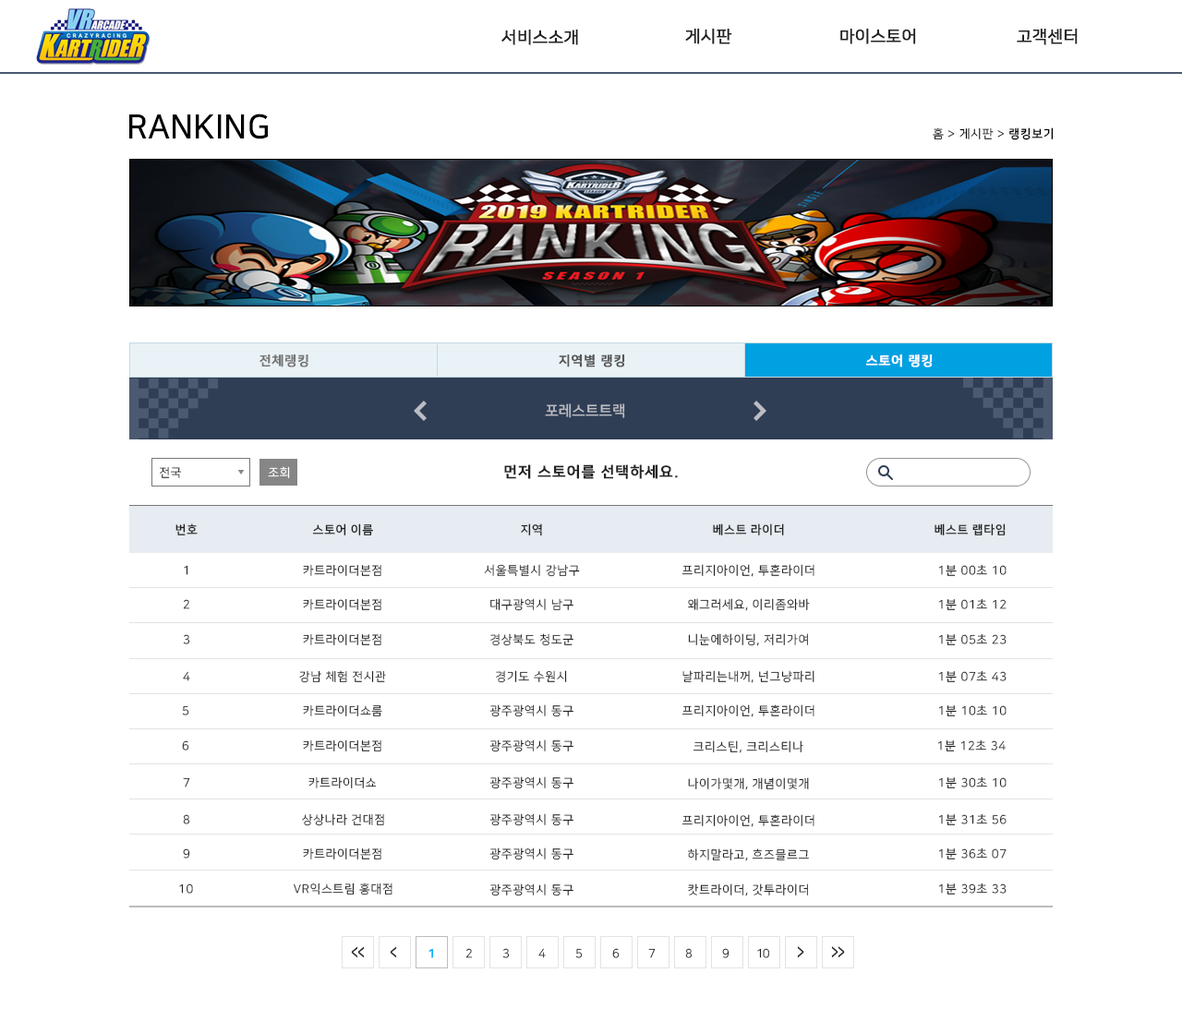
<style>
.page{position:relative;width:1182px;height:1009px;background:#ffffff}
.page>*{position:absolute;margin:0}
.t1{font:16.6px "NanumSquareR";color:#222222;font-weight:bold}
.t2{font:33.2px "NanumSquareB";color:#000000}
.t3{font:12px "NanumSquareR";letter-spacing:0.05em;color:#000000}
.t4{font:12px "NanumSquareB";letter-spacing:0.05em;color:#000000}
.t5{font:12.9px "NanumSquareB";letter-spacing:0.05em;color:#777777;font-weight:bold}
.t6{font:12.9px "NanumSquareB";letter-spacing:0.05em;color:#555555;font-weight:bold}
.t7{font:12.9px "NanumSquareB";letter-spacing:0.05em;color:#ffffff;font-weight:bold}
.t8{font:14.8px "NanumSquareB";color:#bcbcc4}
.t9{font:12px "NanumSquareR";letter-spacing:0.05em;color:#222222}
.t10{font:12px "NanumSquareR";letter-spacing:0.05em;color:#ffffff}
.t11{font:14.8px "NanumSquareB";letter-spacing:0.05em;color:#222222;font-weight:bold}
.t12{font:12px "NanumSquareB";letter-spacing:0.05em;color:#222222}
.t13{font:12px "NanumSquareR";letter-spacing:0.05em}
.t14{font:18.9px "NanumSquareB";letter-spacing:-0.075em;color:#222222;scale:0.63 1}
.t15{font:12px "NanumSquareB";letter-spacing:-0.075em;color:#00b6ff;font-weight:bold}
.t16{font:12px "NanumSquareR";letter-spacing:-0.075em}
.t17{font:12px "NanumSquareR";letter-spacing:-0.075em;color:#222222}
.t18{font:19.5px "NanumSquareB";letter-spacing:-0.075em;color:#222222;scale:0.61 1}
</style>
<div class="page">
<p class="t1" style="left:501px;top:29px;width:77px;height:16px">서비스소개</p>
<p class="t1" style="left:685px;top:28px;width:47px;height:16px">게시판</p>
<p class="t1" style="left:840px;top:28px;width:76px;height:16px">마이스토어</p>
<p class="t1" style="left:1016px;top:28px;width:61px;height:16px">고객센터</p>
<p class="t2" style="left:129px;top:114px;width:139px;height:25px">RANKING</p>
<p class="t3" style="left:932px;top:127px;width:121px;height:13px">홈 &gt; 게시판 &gt; <span class="t4">랭킹보기</span></p>
<p class="t5" style="left:259px;top:354px;width:49px;height:13px">전체랭킹</p>
<p class="t6" style="left:559px;top:354px;width:66px;height:13px">지역별 랭킹</p>
<p class="t7" style="left:865px;top:354px;width:67px;height:13px">스토어 랭킹</p>
<p class="t8" style="left:545px;top:403px;width:80px;height:15px">포레스트트랙</p>
<p class="t9" style="left:160px;top:466px;width:22px;height:12px">전국</p>
<p class="t10" style="left:268px;top:466px;width:22px;height:12px">조회</p>
<p class="t11" style="left:504px;top:464px;width:174px;height:15px">먼저 스토어를 선택하세요.</p>
<p class="t12" style="left:175px;top:523px;width:23px;height:12px">번호</p>
<p class="t12" style="left:312px;top:523px;width:61px;height:12px">스토어 이름</p>
<p class="t12" style="left:521px;top:523px;width:21px;height:13px">지역</p>
<p class="t12" style="left:713px;top:523px;width:71px;height:12px">베스트 라이더</p>
<p class="t12" style="left:934px;top:523px;width:71px;height:12px">베스트 랩타임</p>
<p class="t9" style="left:184px;top:565px;width:4px;height:10px">1</p>
<p class="t9" style="left:303px;top:564px;width:78px;height:12px">카트라이더본점</p>
<p class="t9" style="left:484px;top:564px;width:96px;height:13px">서울특별시 강남구</p>
<p class="t9" style="left:681px;top:564px;width:133px;height:13px">프리지아이언, 투혼라이더</p>
<p class="t9" style="left:938px;top:564px;width:68px;height:12px">1분 00초 10</p>
<p class="t13" style="left:183px;top:599px;width:7px;height:10px">2</p>
<p class="t9" style="left:303px;top:598px;width:78px;height:12px">카트라이더본점</p>
<p class="t9" style="left:490px;top:598px;width:83px;height:13px">대구광역시 남구</p>
<p class="t9" style="left:688px;top:598px;width:122px;height:13px">왜그러세요, 이리좀와바</p>
<p class="t9" style="left:938px;top:598px;width:68px;height:12px">1분 01초 12</p>
<p class="t9" style="left:183px;top:634px;width:7px;height:10px">3</p>
<p class="t9" style="left:303px;top:633px;width:78px;height:12px">카트라이더본점</p>
<p class="t9" style="left:490px;top:633px;width:83px;height:13px">경상북도 청도군</p>
<p class="t9" style="left:688px;top:633px;width:120px;height:13px">니눈에하이딩, 저리가여</p>
<p class="t9" style="left:938px;top:633px;width:68px;height:12px">1분 05초 23</p>
<p class="t13" style="left:183px;top:671px;width:7px;height:10px">4</p>
<p class="t9" style="left:299px;top:670px;width:87px;height:13px">강남 체험 전시관</p>
<p class="t9" style="left:496px;top:670px;width:71px;height:13px">경기도 수원시</p>
<p class="t9" style="left:682px;top:670px;width:132px;height:13px">날파리는내꺼, 넌그냥파리</p>
<p class="t9" style="left:938px;top:670px;width:68px;height:12px">1분 07초 43</p>
<p class="t13" style="left:182px;top:705px;width:7px;height:10px">5</p>
<p class="t9" style="left:303px;top:704px;width:79px;height:12px">카트라이더쇼룸</p>
<p class="t9" style="left:489px;top:704px;width:84px;height:13px">광주광역시 동구</p>
<p class="t9" style="left:681px;top:704px;width:133px;height:13px">프리지아이언, 투혼라이더</p>
<p class="t9" style="left:938px;top:704px;width:68px;height:12px">1분 10초 10</p>
<p class="t13" style="left:182px;top:740px;width:7px;height:11px">6</p>
<p class="t9" style="left:303px;top:739px;width:78px;height:12px">카트라이더본점</p>
<p class="t9" style="left:489px;top:739px;width:84px;height:13px">광주광역시 동구</p>
<p class="t9" style="left:692px;top:740px;width:111px;height:13px">크리스틴, 크리스티나</p>
<p class="t9" style="left:937px;top:739px;width:68px;height:12px">1분 12초 34</p>
<p class="t9" style="left:183px;top:777px;width:7px;height:11px">7</p>
<p class="t9" style="left:308px;top:776px;width:69px;height:12px">카트라이더쇼</p>
<p class="t9" style="left:489px;top:776px;width:84px;height:13px">광주광역시 동구</p>
<p class="t9" style="left:688px;top:777px;width:121px;height:13px">나이가몇개, 개념이몇개</p>
<p class="t9" style="left:938px;top:776px;width:68px;height:12px">1분 30초 10</p>
<p class="t13" style="left:183px;top:814px;width:7px;height:10px">8</p>
<p class="t9" style="left:302px;top:813px;width:82px;height:13px">상상나라 건대점</p>
<p class="t9" style="left:489px;top:813px;width:84px;height:13px">광주광역시 동구</p>
<p class="t9" style="left:681px;top:814px;width:133px;height:13px">프리지아이언, 투혼라이더</p>
<p class="t9" style="left:938px;top:813px;width:68px;height:12px">1분 31초 56</p>
<p class="t9" style="left:183px;top:848px;width:7px;height:11px">9</p>
<p class="t9" style="left:303px;top:848px;width:78px;height:12px">카트라이더본점</p>
<p class="t9" style="left:489px;top:848px;width:84px;height:12px">광주광역시 동구</p>
<p class="t9" style="left:687px;top:848px;width:122px;height:13px">하지말라고, 흐즈믈르그</p>
<p class="t9" style="left:938px;top:848px;width:68px;height:12px">1분 36초 07</p>
<p class="t9" style="left:179px;top:884px;width:14px;height:10px">10</p>
<p class="t9" style="left:294px;top:883px;width:98px;height:13px">VR익스트림 홍대점</p>
<p class="t9" style="left:489px;top:884px;width:84px;height:12px">광주광역시 동구</p>
<p class="t9" style="left:688px;top:884px;width:120px;height:12px">캇트라이더, 갓투라이더</p>
<p class="t9" style="left:938px;top:883px;width:68px;height:12px">1분 39초 33</p>
<p class="t14" style="left:351px;top:946px;width:14px;height:12px">&lt;&lt;</p>
<p class="t14" style="left:390px;top:946px;width:7px;height:12px">&lt;</p>
<p class="t15" style="left:428px;top:948px;width:6px;height:10px">1</p>
<p class="t16" style="left:465px;top:948px;width:8px;height:10px">2</p>
<p class="t17" style="left:502px;top:948px;width:8px;height:10px">3</p>
<p class="t16" style="left:538px;top:948px;width:8px;height:10px">4</p>
<p class="t16" style="left:575px;top:948px;width:8px;height:10px">5</p>
<p class="t16" style="left:612px;top:948px;width:7px;height:10px">6</p>
<p class="t17" style="left:648px;top:948px;width:7px;height:10px">7</p>
<p class="t16" style="left:685px;top:948px;width:7px;height:10px">8</p>
<p class="t17" style="left:722px;top:948px;width:7px;height:10px">9</p>
<p class="t17" style="left:757px;top:948px;width:12px;height:10px">10</p>
<p class="t18" style="left:797px;top:946px;width:7px;height:12px;rotate:180deg">&lt;</p>
<p class="t18" style="left:831px;top:946px;width:14px;height:12px;rotate:180deg">&lt;&lt;</p>
</div>
